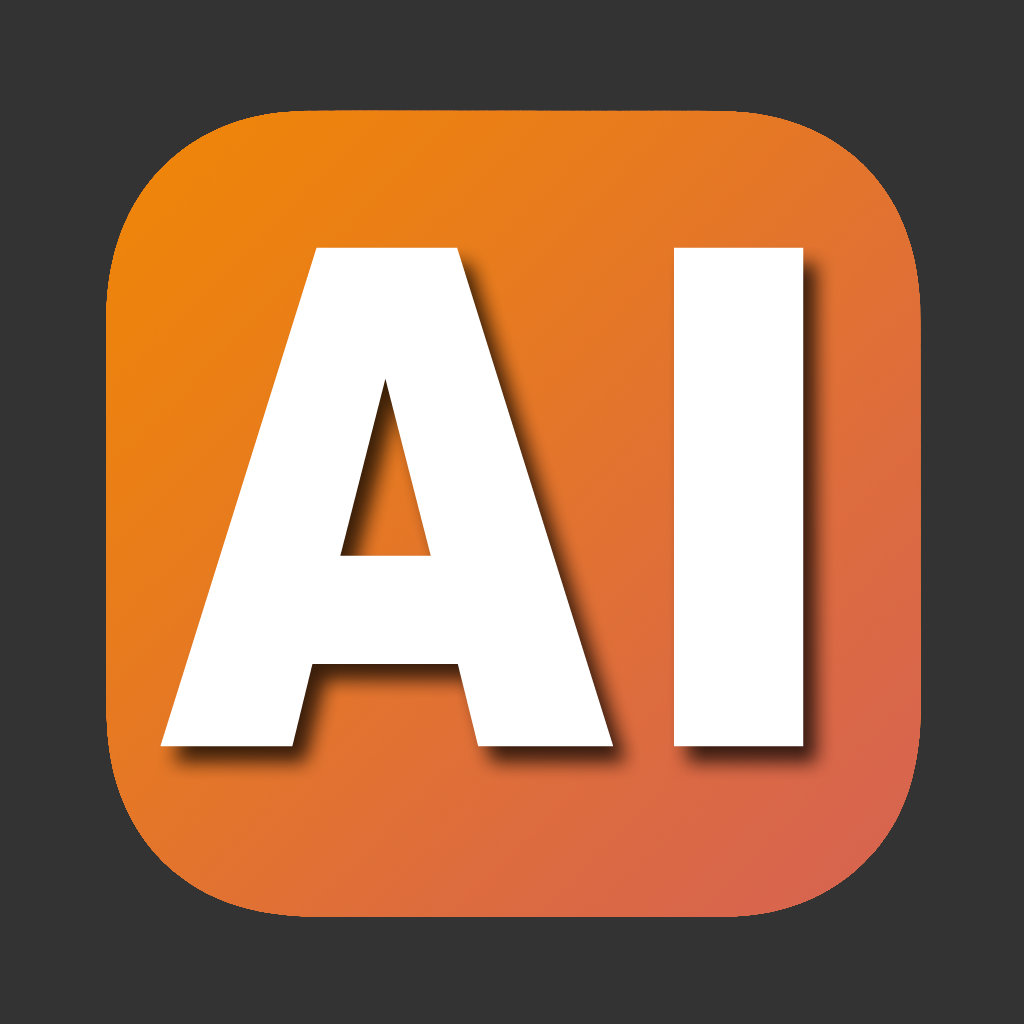
<style>
.page{position:relative;width:1024px;height:1024px;background:#333333}
.page>*{position:absolute;margin:0}
.t1{font:695.6px "Arial-Black";color:#ffffff;font-weight:bold;scale:0.83 1}
</style>
<div class="page">
<p class="t1" style="left:160px;top:247px;width:644px;height:500px">AI</p>
</div>
